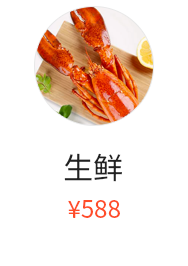
<style>
.page{position:relative;width:188px;height:266px;background:#ffffff}
.page>*{position:absolute;margin:0}
.t1{font:30px "SourceHanSansCN-Regular";color:#222222}
.t2{font:24px "SourceHanSansCN-Regular";color:#ff4d29}
</style>
<div class="page">
<p class="t1" style="left:64px;top:153px;width:58px;height:29px">生鲜</p>
<p class="t2" style="left:68px;top:200px;width:52px;height:18px">¥588</p>
</div>
